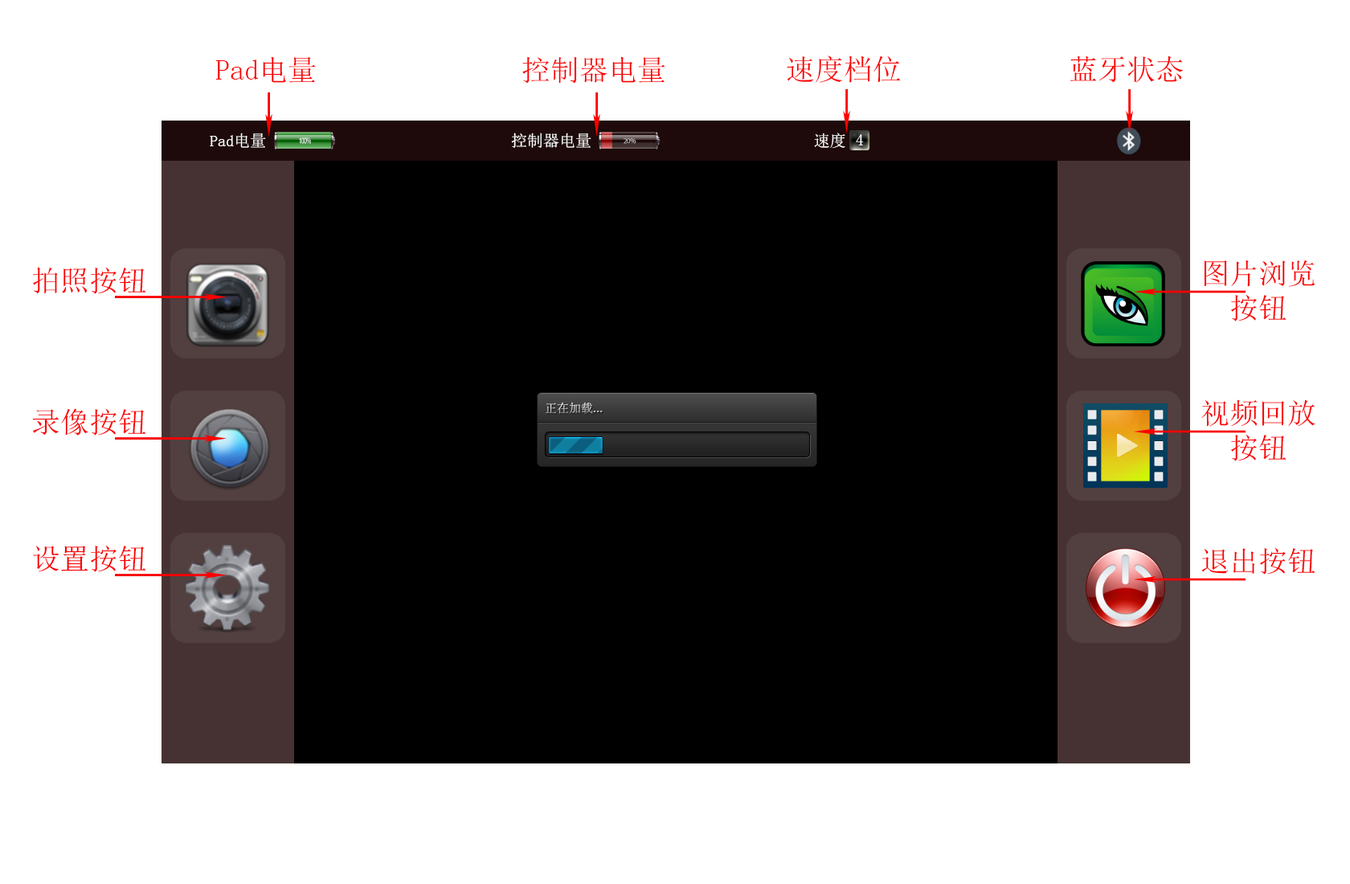
<style>
.page{position:relative;width:1350px;height:884px;background:#ffffff}
.page>*{position:absolute;margin:0}
.t1{font:28.9px "SimSun";color:#fa0000}
</style>
<div class="page">
<p class="t1" style="left:215px;top:56px;width:101px;height:27px">Pad电量</p>
<p class="t1" style="left:522px;top:56px;width:143px;height:28px">控制器电量</p>
<p class="t1" style="left:786px;top:55px;width:114px;height:28px">速度档位</p>
<p class="t1" style="left:1069px;top:55px;width:114px;height:28px">蓝牙状态</p>
<p class="t1" style="left:32px;top:267px;width:114px;height:27px">拍照按钮</p>
<p class="t1" style="left:1203px;top:259px;width:112px;height:62px;text-align:center">图片浏览<br>按钮</p>
<p class="t1" style="left:1201px;top:399px;width:114px;height:62px;text-align:center">视频回放<br>按钮</p>
<p class="t1" style="left:32px;top:408px;width:114px;height:27px">录像按钮</p>
<p class="t1" style="left:33px;top:545px;width:113px;height:27px">设置按钮</p>
<p class="t1" style="left:1201px;top:547px;width:114px;height:27px">退出按钮</p>
</div>
